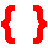
<style>
.page{position:relative;width:48px;height:48px;background:#ffffff}
.page>*{position:absolute;margin:0}
.t1{font:40px "Impact";color:#ff0000;font-weight:bold}
</style>
<div class="page">
<p class="t1" style="left:1px;top:5px;width:46px;height:39px">{  }</p>
</div>
